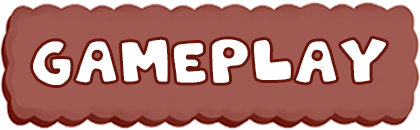
<style>
.page{position:relative;width:420px;height:130px;background:#a05a51}
.page>*{position:absolute;margin:0}
.t1{font:28px "PatchworkStitchlingsColor";letter-spacing:-0.025em;color:#ffffff}
</style>
<div class="page">
<p class="t1" style="left:33px;top:38px;width:353px;height:47px">Gameplay</p>
</div>
